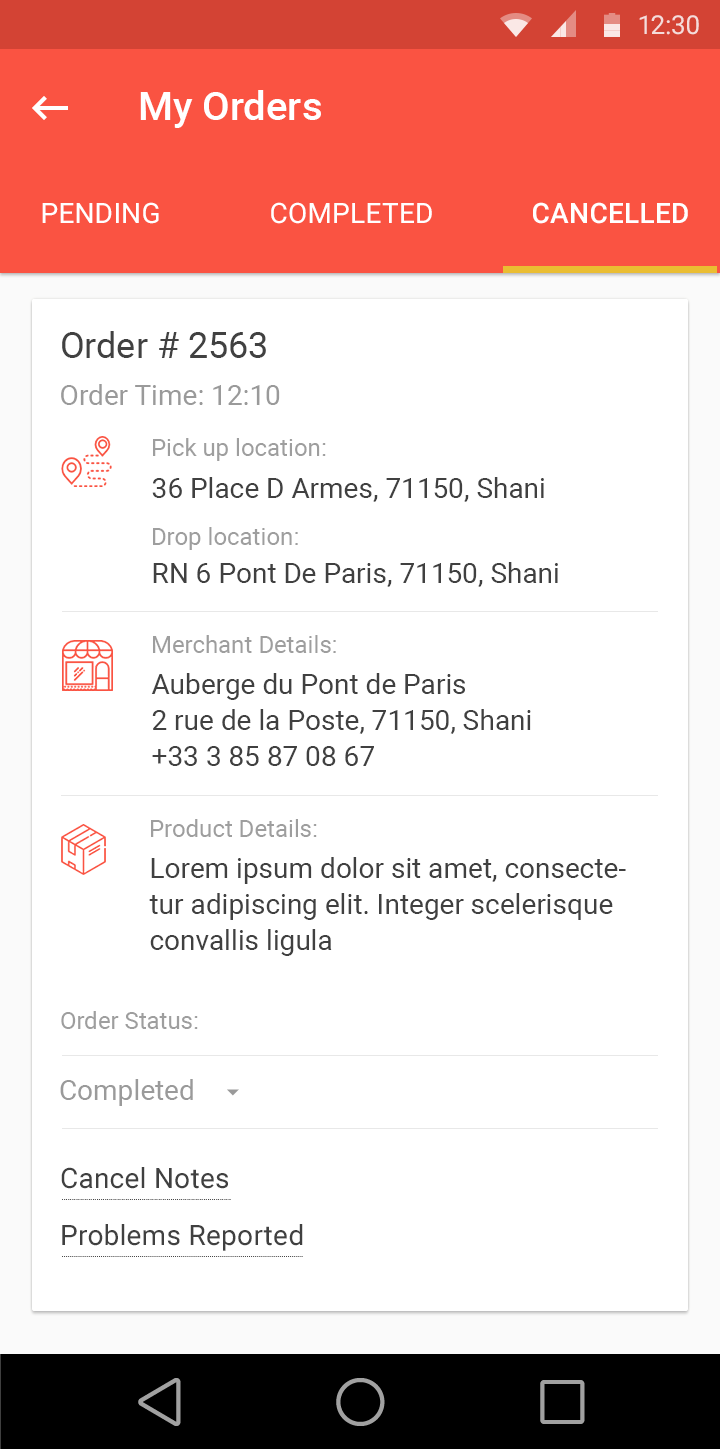
<style>
.page{position:relative;width:720px;height:1449px;background:#ffffff}
.page>*{position:absolute;margin:0}
.t1{font:40px "Roboto-Medium";color:#ffffff}
.t2{font:28px "Roboto-Regular";letter-spacing:0.01em;color:#ffffff;text-transform:uppercase}
.t3{font:28px "Roboto-Medium";letter-spacing:0.01em;color:#ffffff;text-transform:uppercase}
.t4{font:36px "Roboto-Regular";color:#414141}
.t5{font:28px "Roboto-Regular";color:#9a9a9a}
.t6{font:24px "Roboto-Regular";color:#9e9e9e}
.t7{font:28px "Roboto-Regular";color:#404040}
.t8{font:28px/36px "Roboto-Regular";color:#404040}
.t9{font:28px "Roboto-Regular";letter-spacing:0.01em;color:#404040}
</style>
<div class="page">
<p class="t1" style="left:140px;top:90px;width:181px;height:38px">My Orders</p>
<p class="t2" style="left:42px;top:202px;width:117px;height:22px">Pending</p>
<p class="t2" style="left:271px;top:202px;width:161px;height:22px">Completed</p>
<p class="t3" style="left:533px;top:202px;width:155px;height:22px">Cancelled</p>
<p class="t4" style="left:62px;top:331px;width:204px;height:27px">Order # 2563</p>
<p class="t5" style="left:61px;top:384px;width:219px;height:21px">Order Time: 12:10</p>
<p class="t6" style="left:153px;top:438px;width:173px;height:23px">Pick up location:</p>
<p class="t7" style="left:152px;top:477px;width:392px;height:25px">36 Place D Armes, 71150, Shani</p>
<p class="t6" style="left:153px;top:527px;width:145px;height:23px">Drop location:</p>
<p class="t7" style="left:153px;top:562px;width:405px;height:25px">RN 6 Pont De Paris, 71150, Shani</p>
<p class="t6" style="left:153px;top:635px;width:183px;height:18px">Merchant Details:</p>
<p class="t8" style="left:151px;top:673px;width:380px;height:93px">Auberge du Pont de Paris<br>2 rue de la Poste, 71150, Shani<br>+33 3 85 87 08 67</p>
<p class="t6" style="left:151px;top:819px;width:166px;height:18px">Product Details:</p>
<p class="t8" style="left:149px;top:857px;width:477px;height:99px">Lorem ipsum dolor sit amet, consectetur adipiscing elit. Integer scelerisque convallis ligula</p>
<p class="t6" style="left:61px;top:1011px;width:137px;height:18px">Order Status:</p>
<p class="t5" style="left:60px;top:1079px;width:133px;height:27px">Completed</p>
<p class="t9" style="left:61px;top:1167px;width:167px;height:22px">Cancel Notes</p>
<p class="t9" style="left:62px;top:1224px;width:241px;height:27px">Problems Reported</p>
</div>
